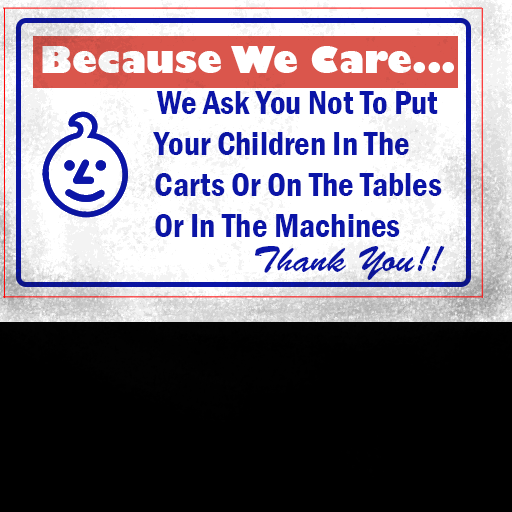
<style>
.page{position:relative;width:512px;height:512px;background:#000000}
.page>*{position:absolute;margin:0}
.t1{font:36px "GillSans-UltraBold";color:#ffffff}
.t2{font:34px "FranklinGothic-DemiCond";color:#0b15a8}
.t3{font:36px "BrushScriptStd";color:#0b15a8}
</style>
<div class="page">
<p class="t1" style="left:42px;top:46px;width:412px;height:27px">Because We Care...</p>
<p class="t2" style="left:153px;top:91px;width:289px;height:146px">We Ask You Not To Put  Your Children In The Carts Or On The Tables <br>Or In The Machines</p>
<p class="t3" style="left:255px;top:246px;width:190px;height:34px">Thank You!!</p>
</div>
